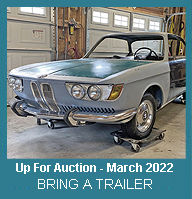
<style>
.page{position:relative;width:192px;height:199px}
.page>*{position:absolute;margin:0}
.t1{font:12px "Arial-BoldMT";color:#ffffff}
.t2{font:14px "ArialMT";color:#ffffff}
</style>
<div class="page">
<p class="t1" style="left:16px;top:163px;width:157px;height:26px;text-align:center">Up For Auction - March 2022<br><span class="t2">BRING A TRAILER</span></p>
</div>
